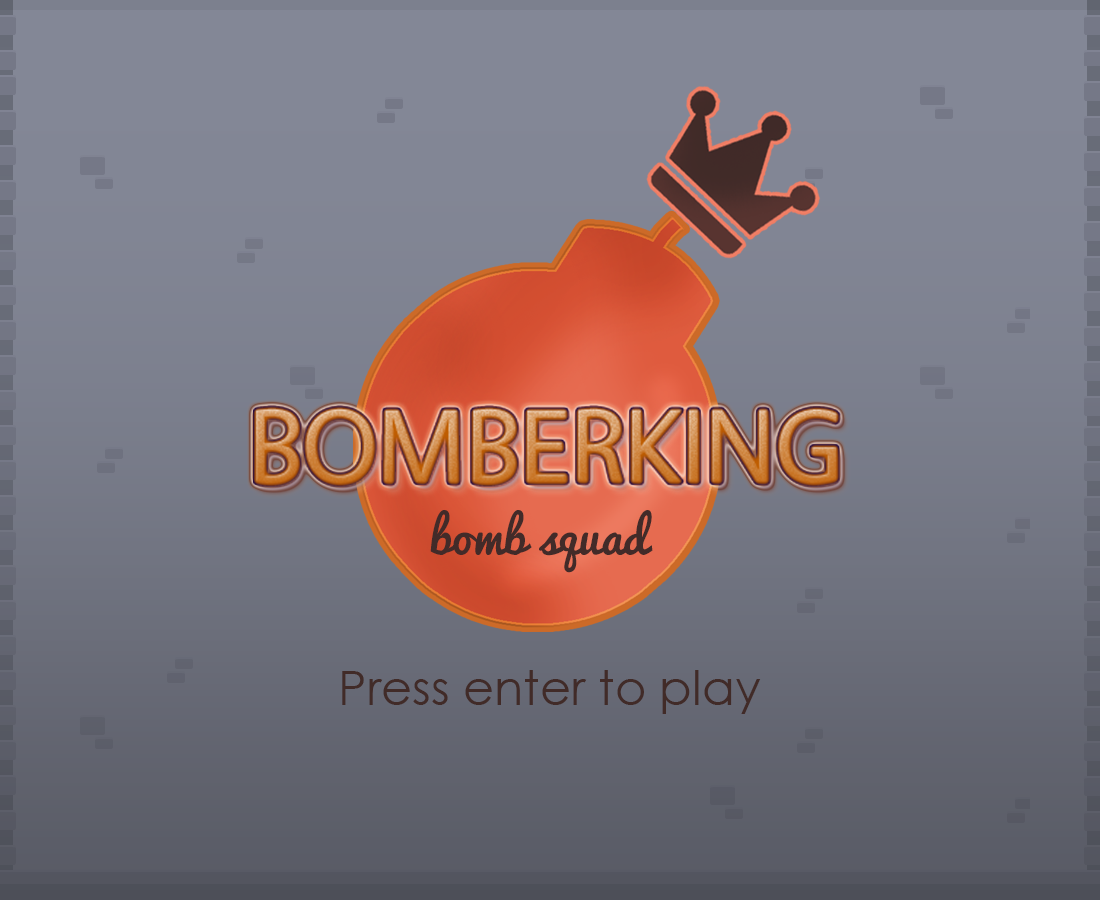
<style>
.page{position:relative;width:1100px;height:900px}
.page>*{position:absolute;margin:0}
.t1{font:48px "Pacifico-Regular";color:#422b29}
.t2{font:48px "CenturyGothic";color:#412b28}
</style>
<div class="page">
<p class="t1" style="left:430px;top:510px;width:223px;height:63px">bomb squad</p>
<p class="t2" style="left:342px;top:670px;width:419px;height:44px">Press enter to play</p>
</div>
